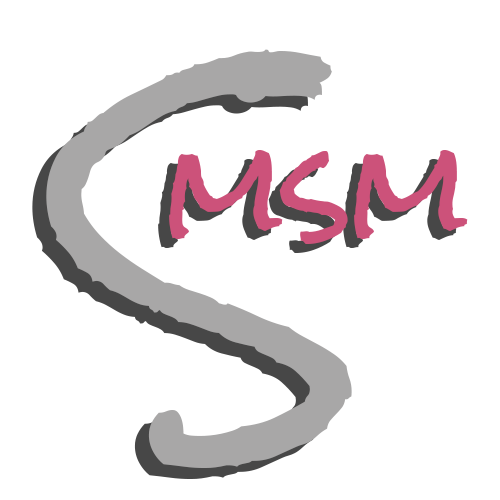
<style>
.page{position:relative;width:500px;height:500px;background:#ffffff}
.page>*{position:absolute;margin:0}
.t1{font:350px "RockSalt-Regular";color:#a8a7a7}
.t2{font:350px "RockSalt-Regular"}
.t3{font:120px "RockSalt-Regular";color:#cc527a}
.t4{font:120px "RockSalt-Regular"}
</style>
<div class="page">
<p class="t1" style="left:46px;top:49px;width:306px;height:419px">S</p>
<p class="t2" style="left:32px;top:60px;width:306px;height:419px">S</p>
<p class="t3" style="left:169px;top:150px;width:299px;height:94px">msm</p>
<p class="t4" style="left:158px;top:159px;width:299px;height:94px">msm</p>
</div>
